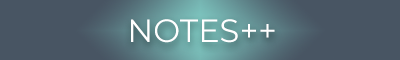
<style>
.page{position:relative;width:400px;height:60px;background:#485563}
.page>*{position:absolute;margin:0}
.t1{font:32px "Montserrat-Regular";color:#ffffff}
</style>
<div class="page">
<p class="t1" style="left:131px;top:19px;width:144px;height:24px">NOTES++</p>
</div>
